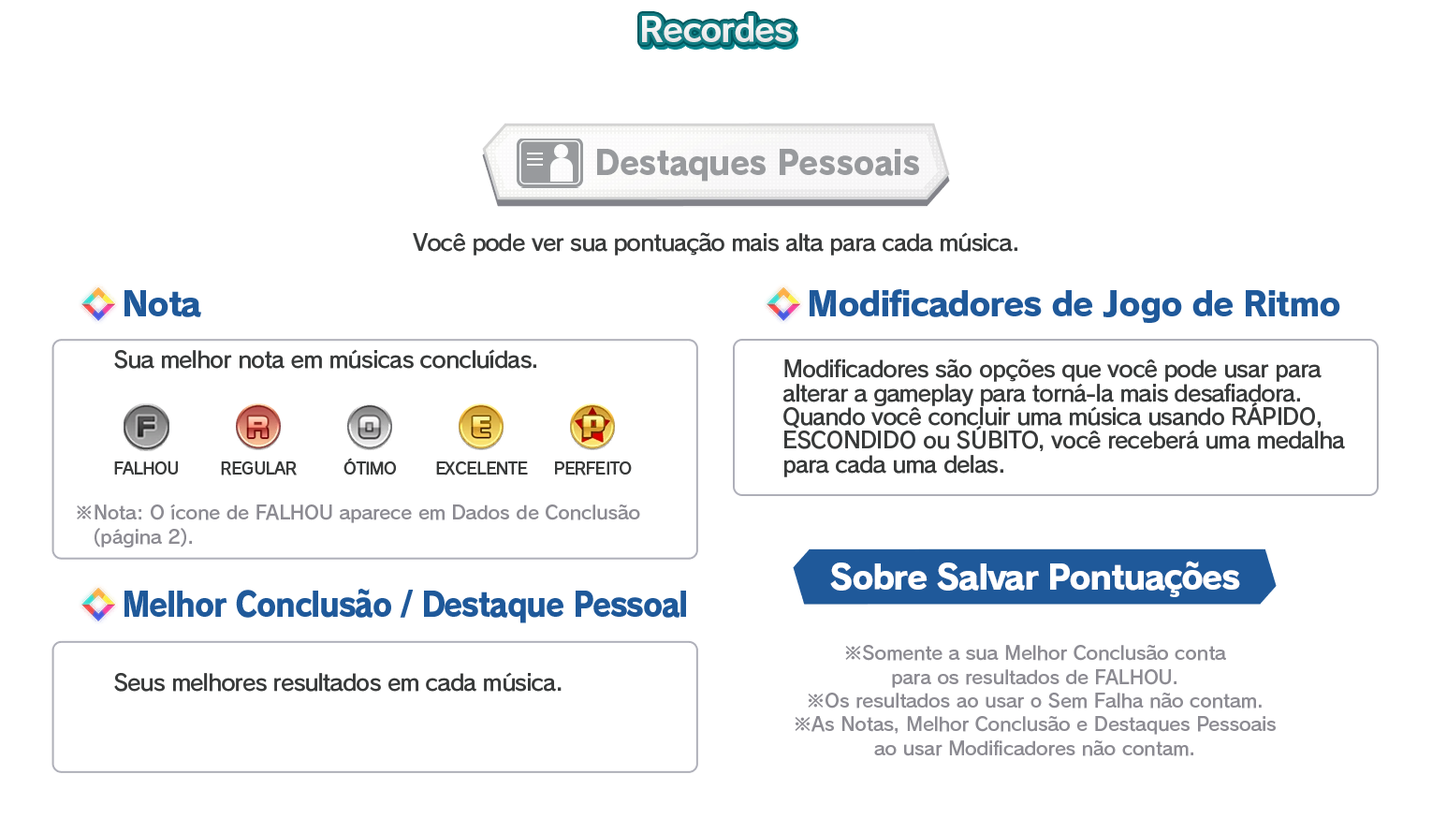
<style>
.page{position:relative;width:1432px;height:833px;background:#ffffff}
.page>*{position:absolute;margin:0}
.t1{font:33.7px "RodinPro-B";letter-spacing:-0.039em;color:#f0f0f1}
.t2{font:33.7px "RodinPro-EB";letter-spacing:-0.021em;color:#989a9d;scale:0.95 1}
.t3{font:22.5px "RodinPro-DB";letter-spacing:-0.04em;color:#383a3a}
.t4{font:33.7px "RodinPro-EB";letter-spacing:-0.04em;color:#1f599a}
.t5{font:22.5px/23.7px "RodinPro-DB";letter-spacing:-0.04em;color:#383a3a}
.t6{font:16.2px "RodinPro-DB";letter-spacing:-0.04em;color:#383a3a}
.t7{font:18.7px/23.7px "RodinPro-DB";letter-spacing:-0.014em;color:#8c8b92}
.t8{font:33.7px "RodinPro-EB";letter-spacing:-0.048em;color:#ffffff}
.t9{font:33.7px "RodinPro-EB";letter-spacing:-0.04em;color:#1f599a;scale:0.9 1}
</style>
<div class="page">
<p class="t1" style="left:642px;top:16px;width:150px;height:26px">Recordes</p>
<p class="t2" style="left:597px;top:149px;width:322px;height:33px">Destaques Pessoais</p>
<p class="t3" style="left:413px;top:232px;width:604px;height:23px">Você pode ver sua pontuação mais alta para cada música.</p>
<p class="t4" style="left:124px;top:290px;width:77px;height:27px">Nota</p>
<p class="t4" style="left:809px;top:289px;width:531px;height:34px">Modificadores de Jogo de Ritmo</p>
<p class="t3" style="left:114px;top:349px;width:422px;height:20px">Sua melhor nota em músicas concluídas.</p>
<p class="t5" style="left:783px;top:358px;width:562px;height:119px">Modificadores são opções que você pode usar para<br>alterar a gameplay para torná-la mais desafiadora.<br>Quando você concluir uma música usando RÁPIDO,<br>ESCONDIDO ou SÚBITO, você receberá uma medalha<br>para cada uma delas.</p>
<p class="t6" style="left:114px;top:460px;width:64px;height:15px">FALHOU</p>
<p class="t6" style="left:221px;top:460px;width:76px;height:15px">REGULAR</p>
<p class="t6" style="left:343px;top:458px;width:53px;height:17px">ÓTIMO</p>
<p class="t6" style="left:436px;top:461px;width:92px;height:14px">EXCELENTE</p>
<p class="t6" style="left:555px;top:461px;width:77px;height:14px">PERFEITO</p>
<p class="t7" style="left:77px;top:503px;width:563px;height:44px">※Nota: O ícone de FALHOU aparece em Dados de Conclusão<br>   (página 2).</p>
<p class="t8" style="left:830px;top:561px;width:410px;height:36px">Sobre Salvar Pontuações</p>
<p class="t9" style="left:124px;top:589px;width:562px;height:34px">Melhor Conclusão / Destaque Pessoal</p>
<p class="t7" style="left:794px;top:645px;width:481px;height:111px;text-align:center">※Somente a sua Melhor Conclusão conta<br>para os resultados de FALHOU.<br>※Os resultados ao usar o Sem Falha não contam.<br>※As Notas, Melhor Conclusão e Destaques Pessoais<br>ao usar Modificadores não contam.</p>
<p class="t3" style="left:114px;top:672px;width:447px;height:20px">Seus melhores resultados em cada música.</p>
</div>
